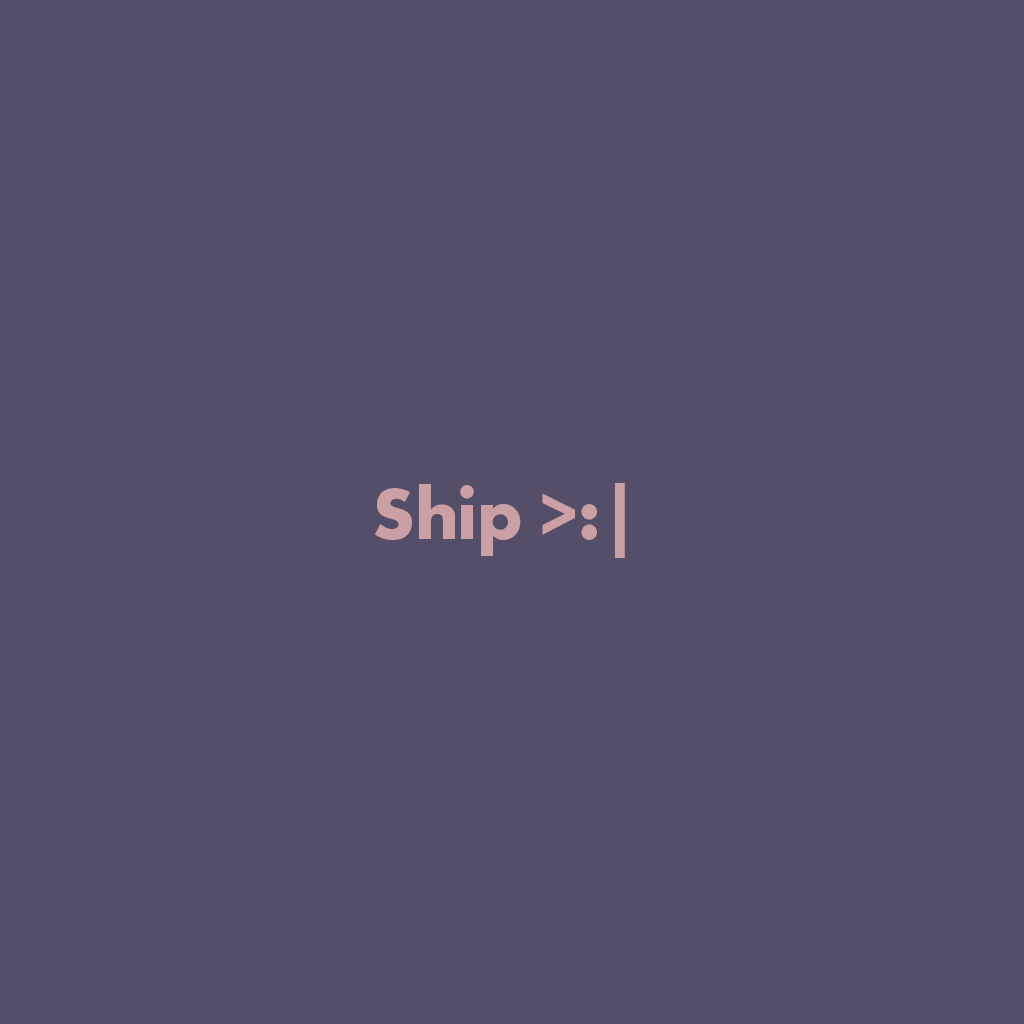
<style>
.page{position:relative;width:1024px;height:1024px;background:#544e68}
.page>*{position:absolute;margin:0}
.t1{font:75px "FuturaPT-Bold";color:#cba0a5}
</style>
<div class="page">
<p class="t1" style="left:375px;top:483px;width:250px;height:75px">Ship &gt;:|</p>
</div>
